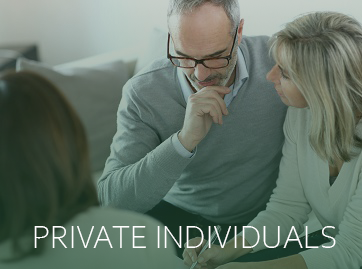
<style>
.page{position:relative;width:362px;height:269px}
.page>*{position:absolute;margin:0}
.t1{font:33.3px "CorbelLight";color:#ffffff}
</style>
<div class="page">
<p class="t1" style="left:34px;top:226px;width:302px;height:22px">PRIVATE INDIVIDUALS</p>
</div>
